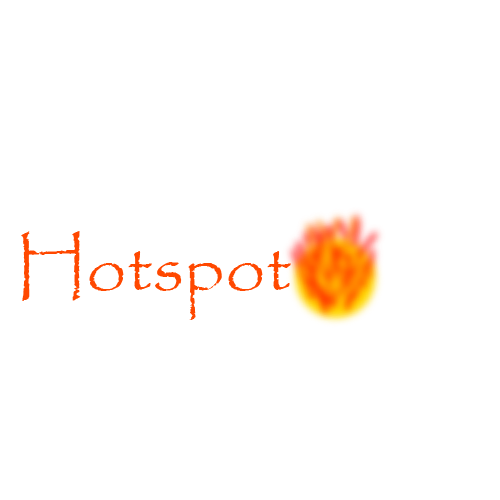
<style>
.page{position:relative;width:500px;height:500px;background:#ffffff}
.page>*{position:absolute;margin:0}
.t1{font:72px "Papyrus-Regular";color:#ff4800}
</style>
<div class="page">
<p class="t1" style="left:21px;top:231px;width:270px;height:89px">Hotspot</p>
</div>
